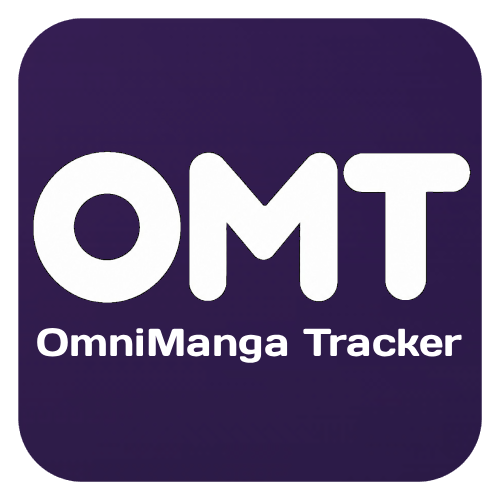
<style>
.page{position:relative;width:500px;height:500px}
.page>*{position:absolute;margin:0}
.t1{font:39px "Days";color:#ffffff}
</style>
<div class="page">
<p class="t1" style="left:37px;top:328px;width:425px;height:35px">OmniManga Tracker</p>
</div>
